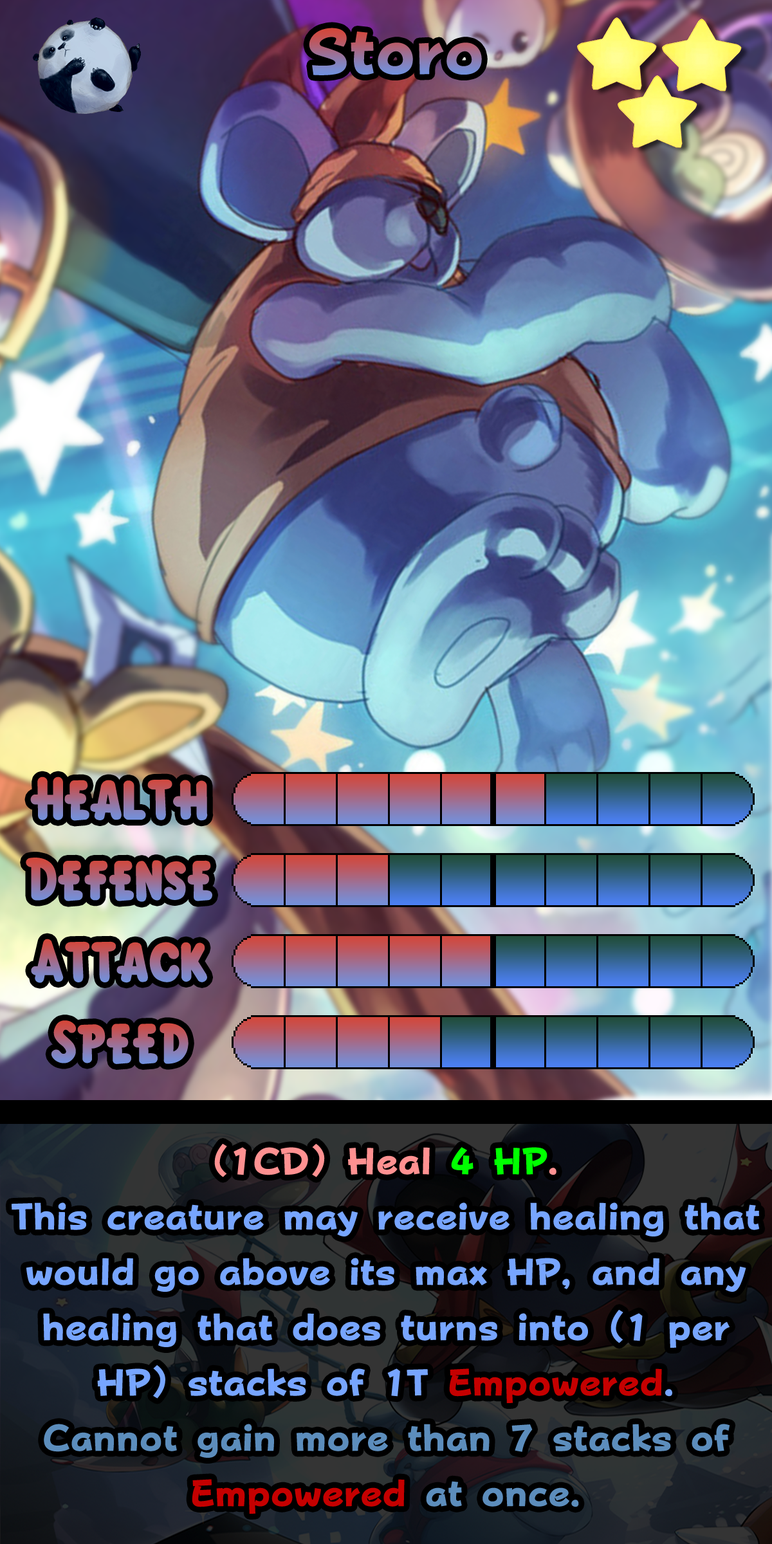
<style>
.page{position:relative;width:772px;height:1544px}
.page>*{position:absolute;margin:0}
.t1{font:110px "FOTPopHappinessStrp-ExtraBold"}
.t2{font:92.7px "KirbyClassic"}
.t3{font:63.7px/55.3px "FOTPopHappinessStrp-ExtraBold";color:#77a5ff}
.t4{font:63.7px/55.3px "FOTPopHappinessStrp-ExtraBold";color:#ff9191}
.t5{font:63.7px/55.3px "FOTPopHappinessStrp-ExtraBold";color:#00ff00}
.t6{font:63.7px/18.7px "FOTPopHappinessStrp-ExtraBold";color:#77a5ff}
.t7{font:63.7px/18.7px "FOTPopHappinessStrp-ExtraBold";color:#c50000}
.t8{font:63.7px/55.3px "FOTPopHappinessStrp-ExtraBold";color:#5c8dbc}
.t9{font:63.7px/55.3px "FOTPopHappinessStrp-ExtraBold";color:#c50000}
</style>
<div class="page">
<p class="t1" style="left:309px;top:28px;width:173px;height:47px">Storo</p>
<p class="t2" style="left:30px;top:777px;width:178px;height:44px">Health</p>
<p class="t2" style="left:26px;top:858px;width:186px;height:44px">Defense</p>
<p class="t2" style="left:31px;top:939px;width:176px;height:44px">Attack</p>
<p class="t2" style="left:51px;top:1021px;width:138px;height:43px">Speed</p>
<p class="t3" style="left:12px;top:1144px;width:748px;height:370px;text-align:center"><span class="t4">(1CD) Heal </span><span class="t5">4 HP</span><span class="t4">.<br></span>This creature may receive healing that would go above its max HP, and any healing that does turns into <span class="t6">(1 </span>per HP) stacks of 1T <span class="t7">Empowered</span>.<br><span class="t8">Cannot gain more than 7 stacks of </span><span class="t9">Empowered </span><span class="t8">at once.</span></p>
</div>
